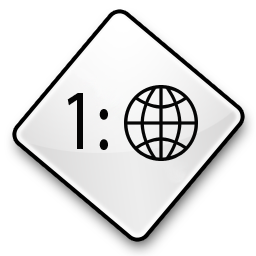
<style>
.page{position:relative;width:256px;height:256px;background:#ffffff}
.page>*{position:absolute;margin:0}
.t1{font:85.8px "MyriadPro-Regular";letter-spacing:0.005em;color:#040404;scale:0.82 1}
</style>
<div class="page">
<p class="t1" style="left:67px;top:93px;width:41px;height:57px">1:</p>
</div>
